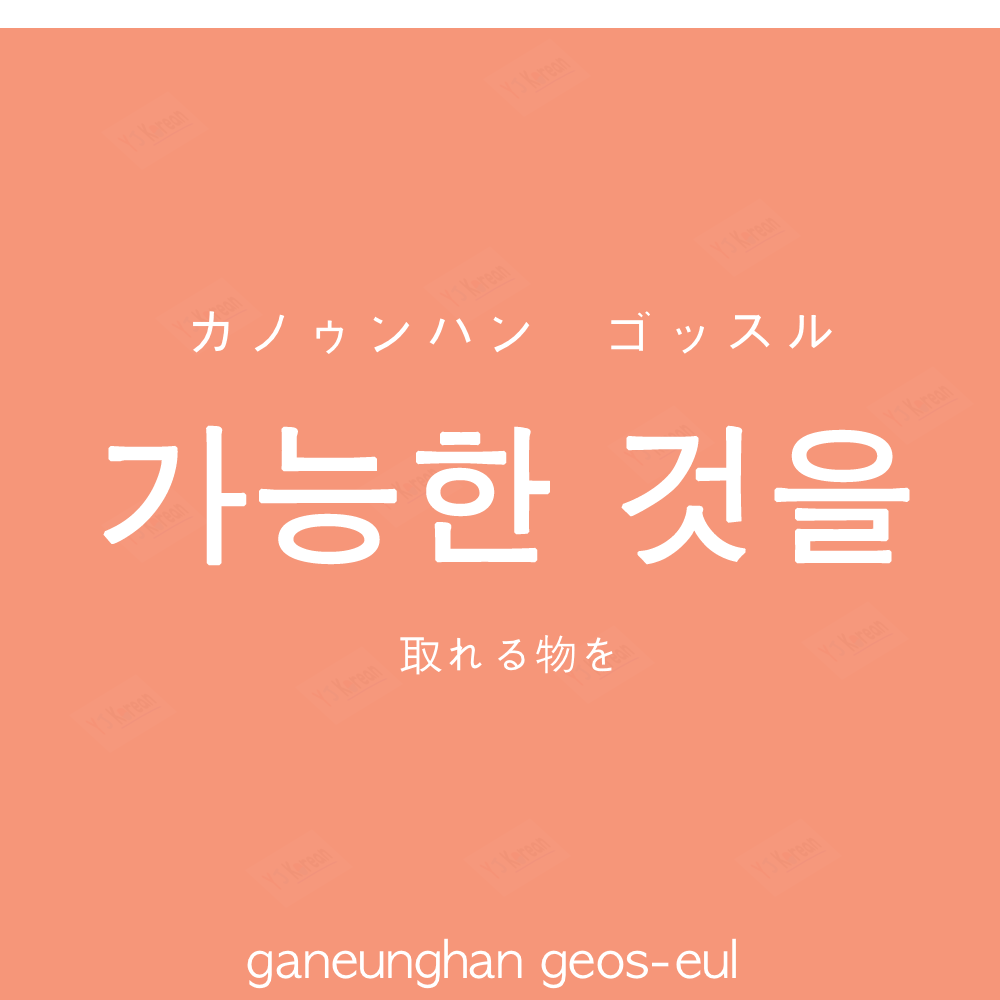
<style>
.page{position:relative;width:1000px;height:1000px;background:#f69679}
.page>*{position:absolute;margin:0}
.t1{font:60px "AppleGothic";color:#ffffff}
.t2{font:150px "AppleGothic";color:#ffffff;font-weight:bold}
.t3{font:45px "AppleGothic";color:#ffffff}
.t4{font:50px "AppleGothic";color:#ffffff}
</style>
<div class="page">
<p class="t1" style="left:193px;top:311px;width:639px;height:43px">カノゥンハン　ゴッスル</p>
<p class="t2" style="left:103px;top:425px;width:807px;height:141px">가능한 것을</p>
<p class="t3" style="left:400px;top:635px;width:213px;height:40px">取れる物を</p>
<p class="t4" style="left:247px;top:938px;width:489px;height:51px">ganeunghan geos-eul</p>
</div>
